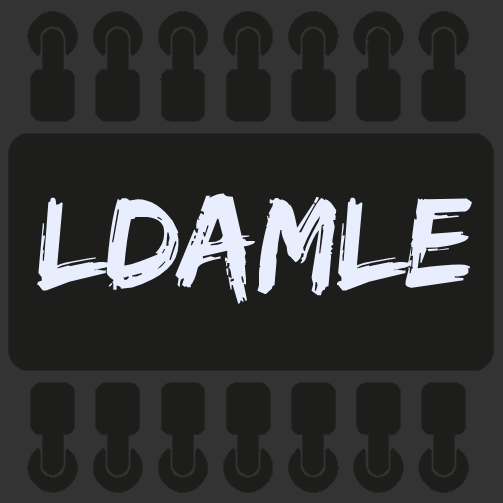
<style>
.page{position:relative;width:503px;height:503px;background:#1d1d1b}
.page>*{position:absolute;margin:0}
.t1{font:133px "Edo";color:#e9eeff}
</style>
<div class="page">
<p class="t1" style="left:37px;top:193px;width:435px;height:111px">LDAMLE</p>
</div>
